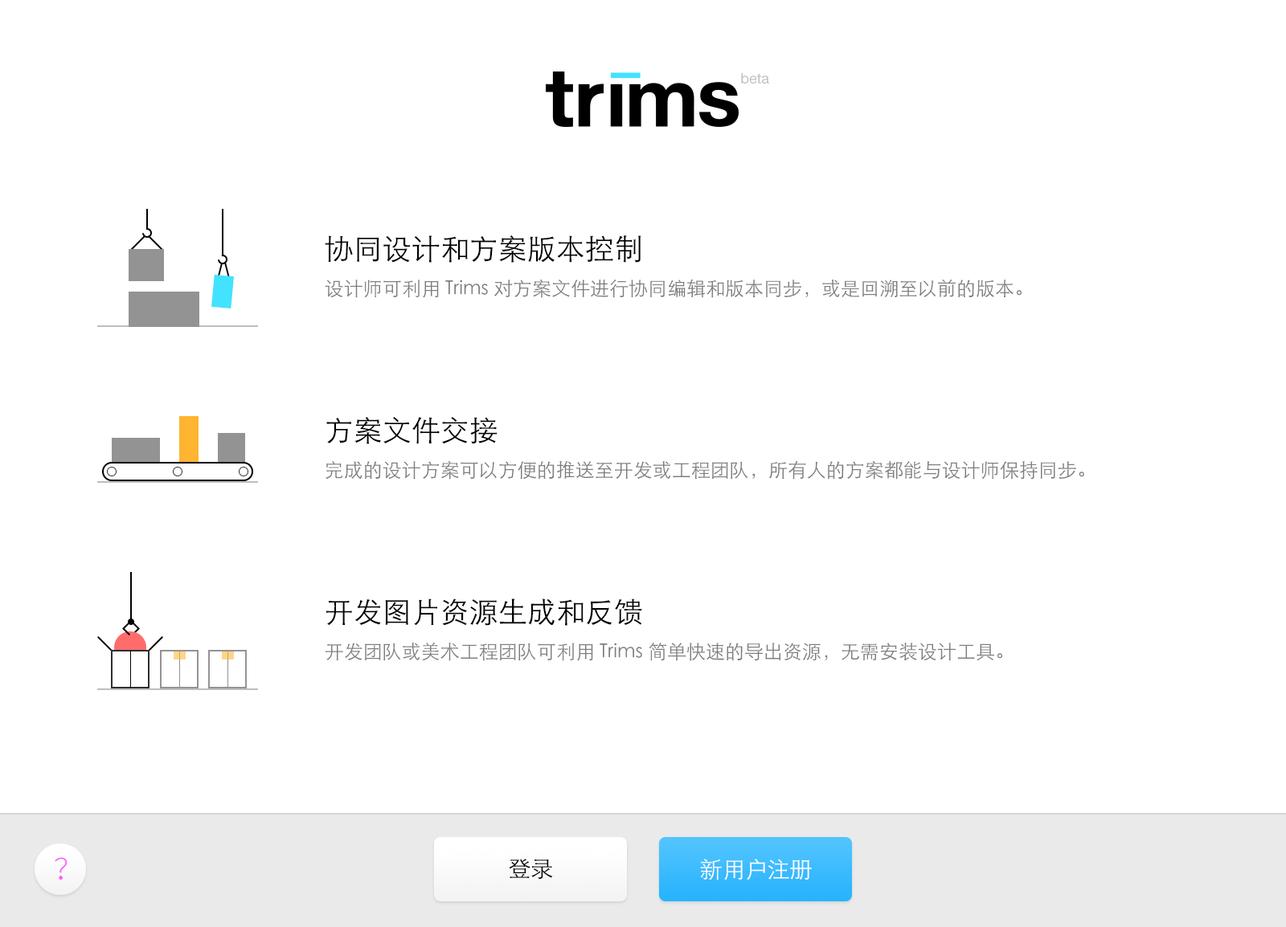
<style>
.page{position:relative;width:1286px;height:927px;background:#ffffff}
.page>*{position:absolute;margin:0}
.t1{font:14.5px "HelveticaNeue";color:#bebebe}
.t2{font:19.3px/36.2px "STHeitiSC-Light";color:#7d7d7d}
.t3{font:28.9px/32.9px "STHeitiSC-Light";color:#000000}
.t4{font:28.9px "SourceHanSansCN-Light";color:#fd5eff}
.t5{font:22.5px "STHeitiSC-Light";color:#000000}
.t6{font:22.5px "STHeitiSC-Light";color:#ffffff}
</style>
<div class="page">
<p class="t1" style="left:741px;top:73px;width:28px;height:11px">beta</p>
<p class="t2" style="left:325px;top:235px;width:696px;height:63px"><span class="t3">协同设计和方案版本控制<br></span>设计师可利用 Trims 对方案文件进行协同编辑和版本同步，或是回溯至以前的版本。</p>
<p class="t2" style="left:325px;top:417px;width:759px;height:63px"><span class="t3">方案文件交接<br></span>完成的设计方案可以方便的推送至开发或工程团队，所有人的方案都能与设计师保持同步。</p>
<p class="t2" style="left:325px;top:599px;width:677px;height:62px"><span class="t3">开发图片资源生成和反馈<br></span>开发团队或美术工程团队可利用 Trims 简单快速的导出资源，无需安装设计工具。</p>
<p class="t4" style="left:55px;top:857px;width:13px;height:23px">？</p>
<p class="t5" style="left:509px;top:859px;width:44px;height:21px">登录</p>
<p class="t6" style="left:700px;top:859px;width:112px;height:22px">新用户注册</p>
</div>
